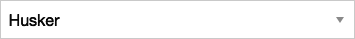
<style>
.page{position:relative;width:355px;height:39px;background:#ffffff}
.page>*{position:absolute;margin:0}
.t1{font:12px "MyriadPro-Regular";color:#0a0a0a}
</style>
<div class="page">
<p class="t1" style="left:9px;top:14px;width:51px;height:13px">Husker</p>
</div>
